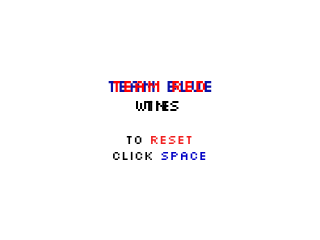
<style>
.page{position:relative;width:320px;height:240px;background:#ffffff}
.page>*{position:absolute;margin:0}
.t1{font:18.3px "Silkscreen";color:#0a10a5}
.t2{font:18.3px "Silkscreen";color:#ff0000}
.t3{font:17px "Silkscreen";color:#000000}
.t4{font:13.6px "Silkscreen";color:#f11f1f}
.t5{font:13.6px "Silkscreen";color:#000000}
.t6{font:13.6px "Silkscreen";color:#0000c6}
</style>
<div class="page">
<p class="t1" style="left:108px;top:81px;width:104px;height:11px">Team Blue</p>
<p class="t2" style="left:113px;top:81px;width:93px;height:11px">Team RED</p>
<p class="t3" style="left:136px;top:100px;width:43px;height:11px">WINS</p>
<p class="t3" style="left:146px;top:100px;width:23px;height:11px">TIE</p>
<p class="t4" style="left:113px;top:136px;width:93px;height:24px;text-align:center"><span class="t5">To </span>Reset<br><span class="t5">Click </span><span class="t6">Space</span></p>
</div>
